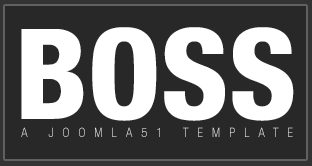
<style>
.page{position:relative;width:312px;height:166px;background:#282828}
.page>*{position:absolute;margin:0}
.t1{font:125.7px "HelveticaNeueLTCom-HvCn";color:#ffffff;text-transform:uppercase}
.t2{font:13.1px "HelveticaNeueLTCom-ThCn";letter-spacing:0.72em;color:#ffffff;text-transform:uppercase;scale:0.96 1}
</style>
<div class="page">
<p class="t1" style="left:21px;top:27px;width:273px;height:94px">Boss</p>
<p class="t2" style="left:21px;top:127px;width:272px;height:10px">A Joomla51 Template</p>
</div>
